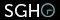
<style>
.page{position:relative;width:60px;height:20px;background:#000000}
.page>*{position:absolute;margin:0}
.t1{font:18px "MuseoSans-500";color:#ffffff}
</style>
<div class="page">
<p class="t1" style="left:4px;top:4px;width:35px;height:13px">SGH</p>
</div>
